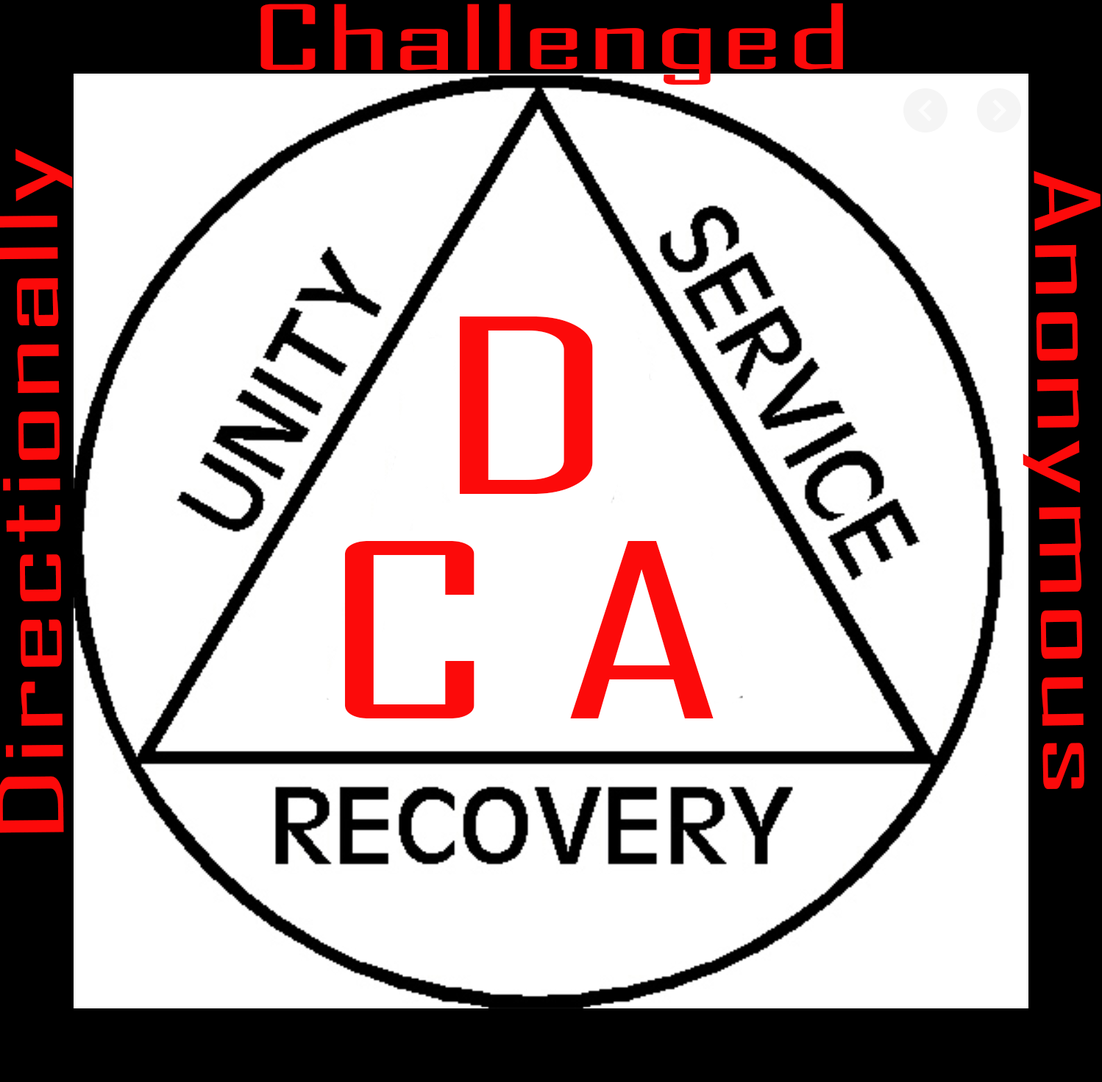
<style>
.page{position:relative;width:1102px;height:1082px;background:#ffffff}
.page>*{position:absolute;margin:0}
.t1{font:85.9px "AgencyFB-Reg";color:#fc0a0a;scale:2.06 1}
.t2{font:231.5px "AgencyFB-Reg";color:#fc0a0a;scale:1.82 1}
</style>
<div class="page">
<p class="t1" style="left:260px;top:3px;width:583px;height:82px">Challenged</p>
<p class="t1" style="left:1023px;top:171px;width:78px;height:618px;rotate:89deg">Anonymous</p>
<p class="t2" style="left:459px;top:316px;width:134px;height:178px">D</p>
<p class="t2" style="left:344px;top:541px;width:131px;height:177px">C</p>
<p class="t2" style="left:570px;top:541px;width:144px;height:177px">A</p>
</div>
